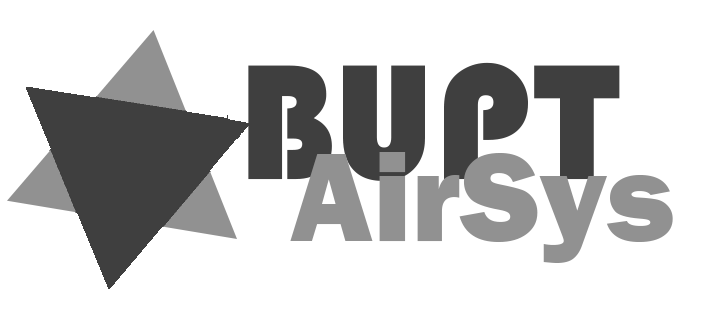
<style>
.page{position:relative;width:720px;height:320px;background:#ffffff}
.page>*{position:absolute;margin:0}
.t1{font:170px "STHupo";color:#3f3f3f}
.t2{font:130px "FranklinGothic-Heavy";color:#919191}
</style>
<div class="page">
<p class="t1" style="left:248px;top:62px;width:372px;height:119px">BUPT</p>
<p class="t2" style="left:290px;top:152px;width:383px;height:111px">AirSys</p>
</div>
